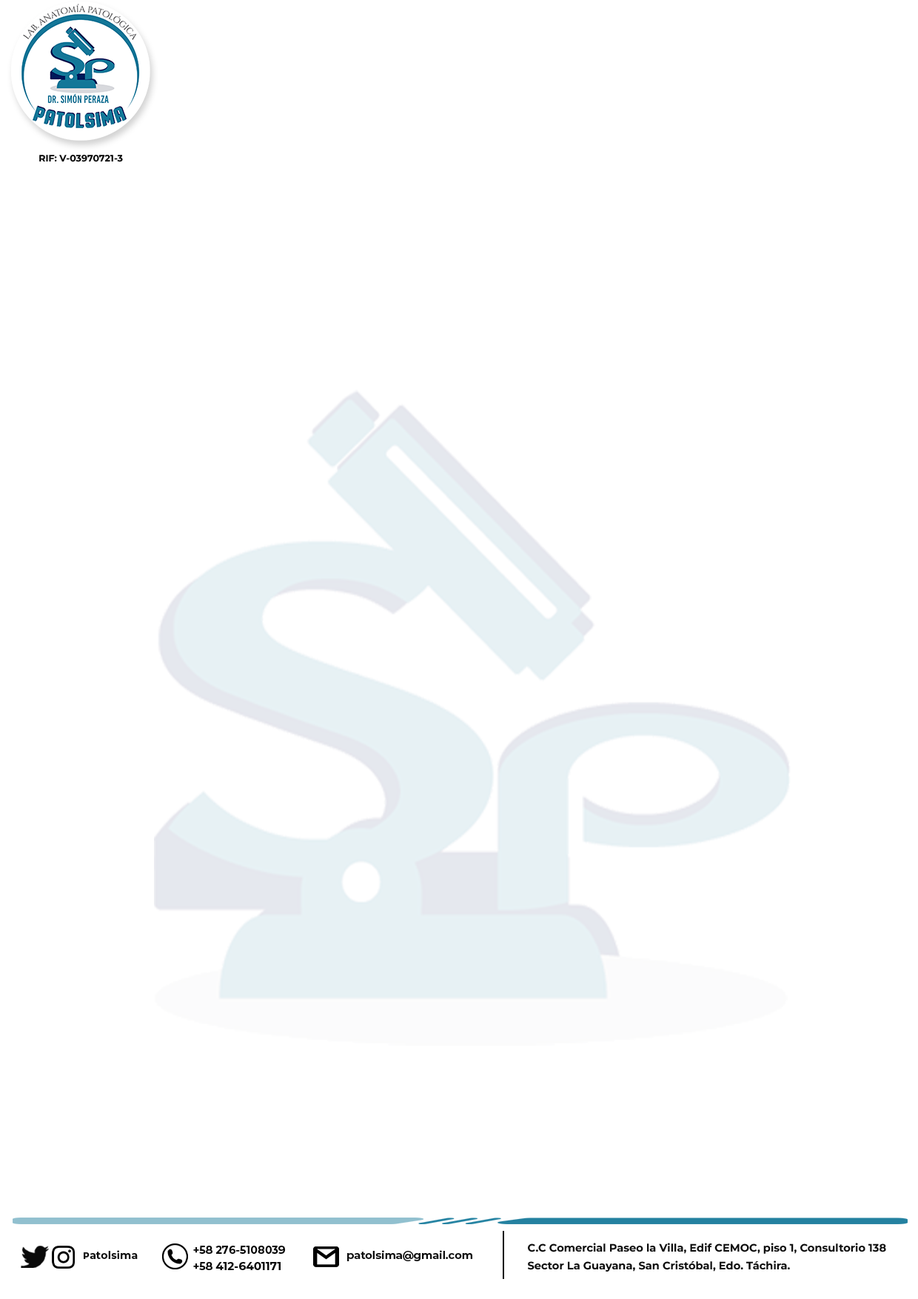
<style>
.page{position:relative;width:918px;height:1299px;background:#ffffff}
.page>*{position:absolute;margin:0}
.t1{font:9.3px "Montserrat-Bold";color:#070707}
.t2{font:10.8px "Montserrat-Bold";color:#0d0d0d}
.t3{font:10.8px/15.4px "Montserrat-Bold";color:#070707}
.t4{font:11.3px/16.1px "Montserrat-Bold";color:#070707}
.t5{font:10.8px/17.7px "Montserrat-Bold";color:#0d0d0d}
</style>
<div class="page">
<p class="t1" style="left:39px;top:154px;width:84px;height:8px">RIF: V-03970721-3</p>
<p class="t2" style="left:84px;top:1250px;width:54px;height:9px">Patolsima</p>
<p class="t3" style="left:193px;top:1245px;width:92px;height:25px">+58 276-5108039<br>+58 <span class="t4">412-6401171</span></p>
<p class="t2" style="left:347px;top:1250px;width:125px;height:11px">patolsima@gmail.com</p>
<p class="t5" style="left:528px;top:1242px;width:358px;height:29px">C.C Comercial Paseo la Villa, Edif CEMOC, piso 1, Consultorio 138<br>Sector La Guayana, San Cristóbal, Edo. Táchira.</p>
</div>
